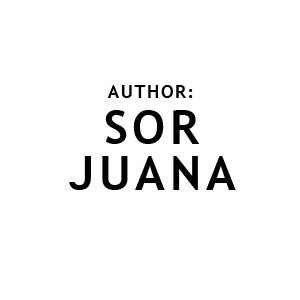
<style>
.page{position:relative;width:300px;height:300px;background:#ffffff}
.page>*{position:absolute;margin:0}
.t1{font:46.9px/45.9px "TrebuchetMS-Bold";letter-spacing:0.1em;color:#000000}
.t2{font:17.6px/45.9px "TrebuchetMS-Bold";letter-spacing:0.1em;color:#000000}
</style>
<div class="page">
<p class="t1" style="left:69px;top:85px;width:167px;height:105px;text-align:center"><span class="t2">AUTHOR:<br></span>SOR<br>JUANA</p>
</div>
